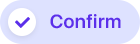
<style>
.page{position:relative;width:140px;height:44px;background:#dee2ff}
.page>*{position:absolute;margin:0}
.t1{font:19px "SFUIDisplay-Semibold";letter-spacing:0.02em;color:#5b2fea}
</style>
<div class="page">
<p class="t1" style="left:50px;top:14px;width:71px;height:15px">Confirm</p>
</div>
